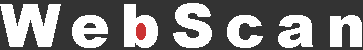
<style>
.page{position:relative;width:363px;height:50px;background:#333333}
.page>*{position:absolute;margin:0}
.t1{font:60px "Arial-Black";letter-spacing:0.18em;color:#ffffff}
</style>
<div class="page">
<p class="t1" style="left:0px;top:3px;width:362px;height:45px">WebScan</p>
</div>
